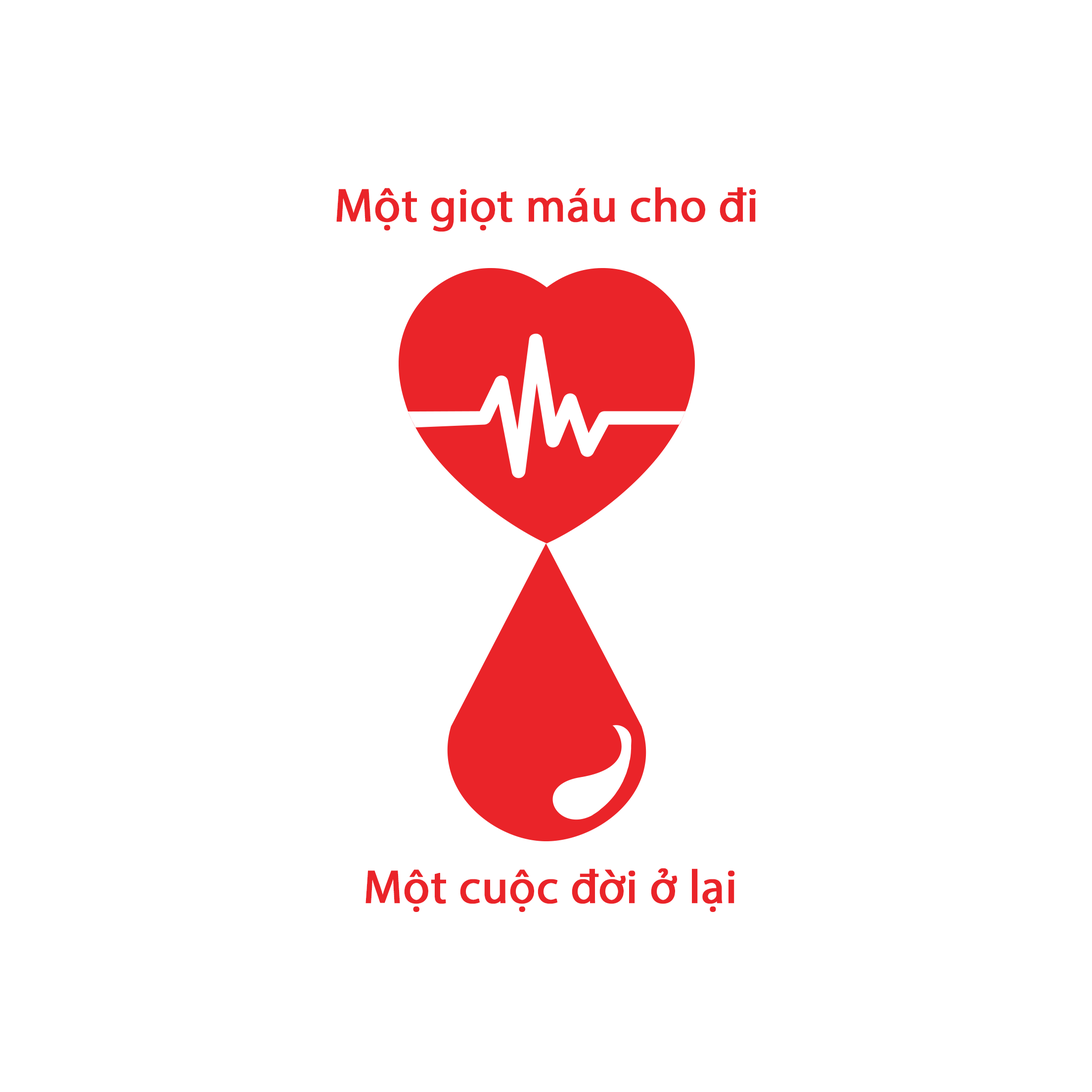
<style>
.page{position:relative;width:1092px;height:1092px;background:#ffffff}
.page>*{position:absolute;margin:0}
.t1{font:47.6px "MyriadPro-Regular";color:#ea2429;font-weight:bold}
</style>
<div class="page">
<p class="t1" style="left:336px;top:187px;width:420px;height:45px">Một giọt máu cho đi</p>
<p class="t1" style="left:365px;top:868px;width:370px;height:44px">Một cuộc đời ở lại</p>
</div>
